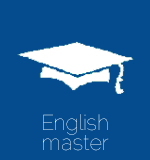
<style>
.page{position:relative;width:150px;height:160px;background:#054c8e}
.page>*{position:absolute;margin:0}
.t1{font:21.5px/20px "Raleway-Thin"}
</style>
<div class="page">
<p class="t1" style="left:43px;top:114px;width:66px;height:37px;text-align:center">English<br>master</p>
</div>
